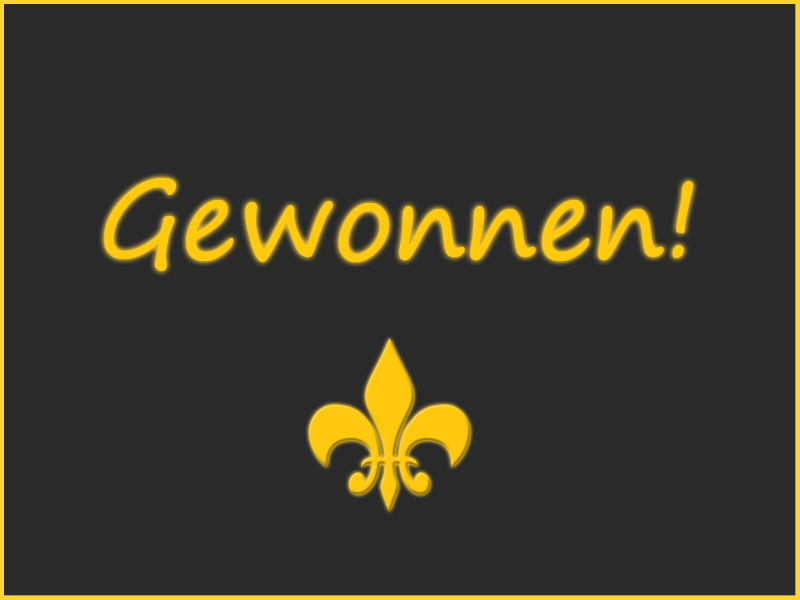
<style>
.page{position:relative;width:800px;height:600px;background:#2a2a2a}
.page>*{position:absolute;margin:0}
.t1{font:108px "SegoePrint";color:#ffc90f}
</style>
<div class="page">
<p class="t1" style="left:104px;top:178px;width:590px;height:93px">Gewonnen!</p>
</div>
